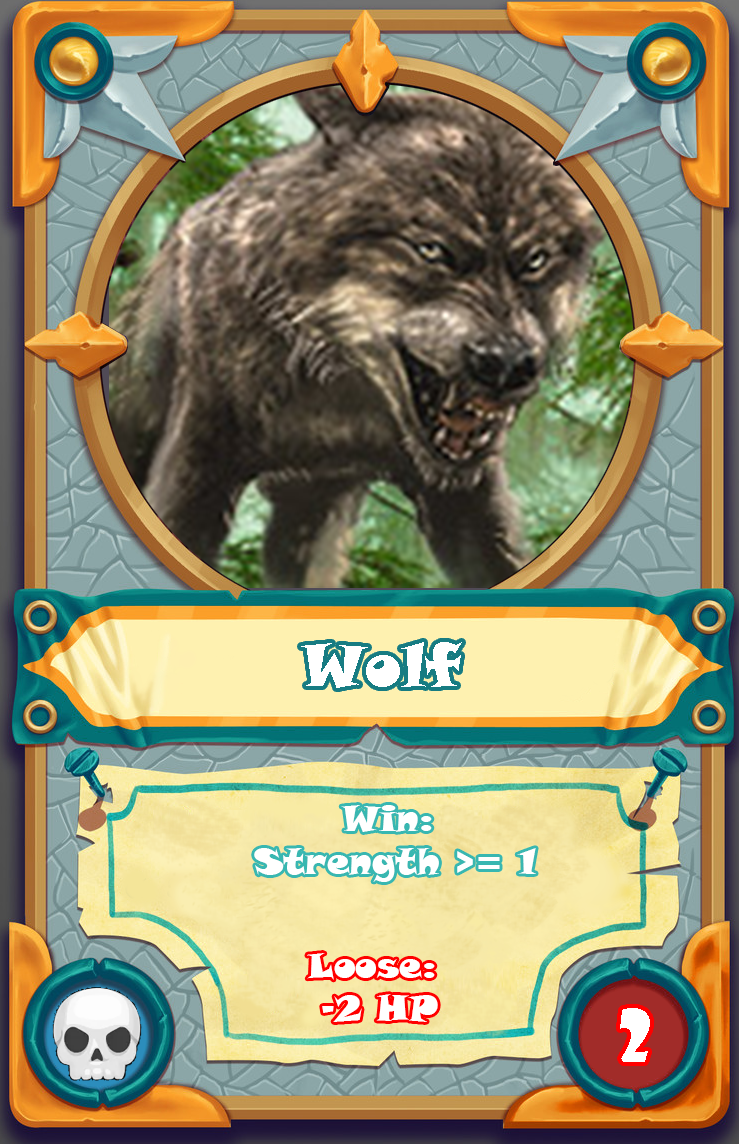
<style>
.page{position:relative;width:739px;height:1144px}
.page>*{position:absolute;margin:0}
.t1{font:60px "SnapITC-Regular";color:#ffffff}
.t2{font:36px "SnapITC-Regular";color:#ffffff}
.t3{font:72px "ShowcardGothic-Reg";color:#ffffff}
</style>
<div class="page">
<p class="t1" style="left:301px;top:642px;width:161px;height:46px">Wolf</p>
<p class="t2" style="left:254px;top:805px;width:282px;height:77px;text-align:center">Win: <br>Strength &gt;= 1</p>
<p class="t2" style="left:307px;top:953px;width:131px;height:69px;text-align:center">Loose: <br>-2 HP</p>
<p class="t3" style="left:620px;top:1008px;width:30px;height:54px">2</p>
</div>
